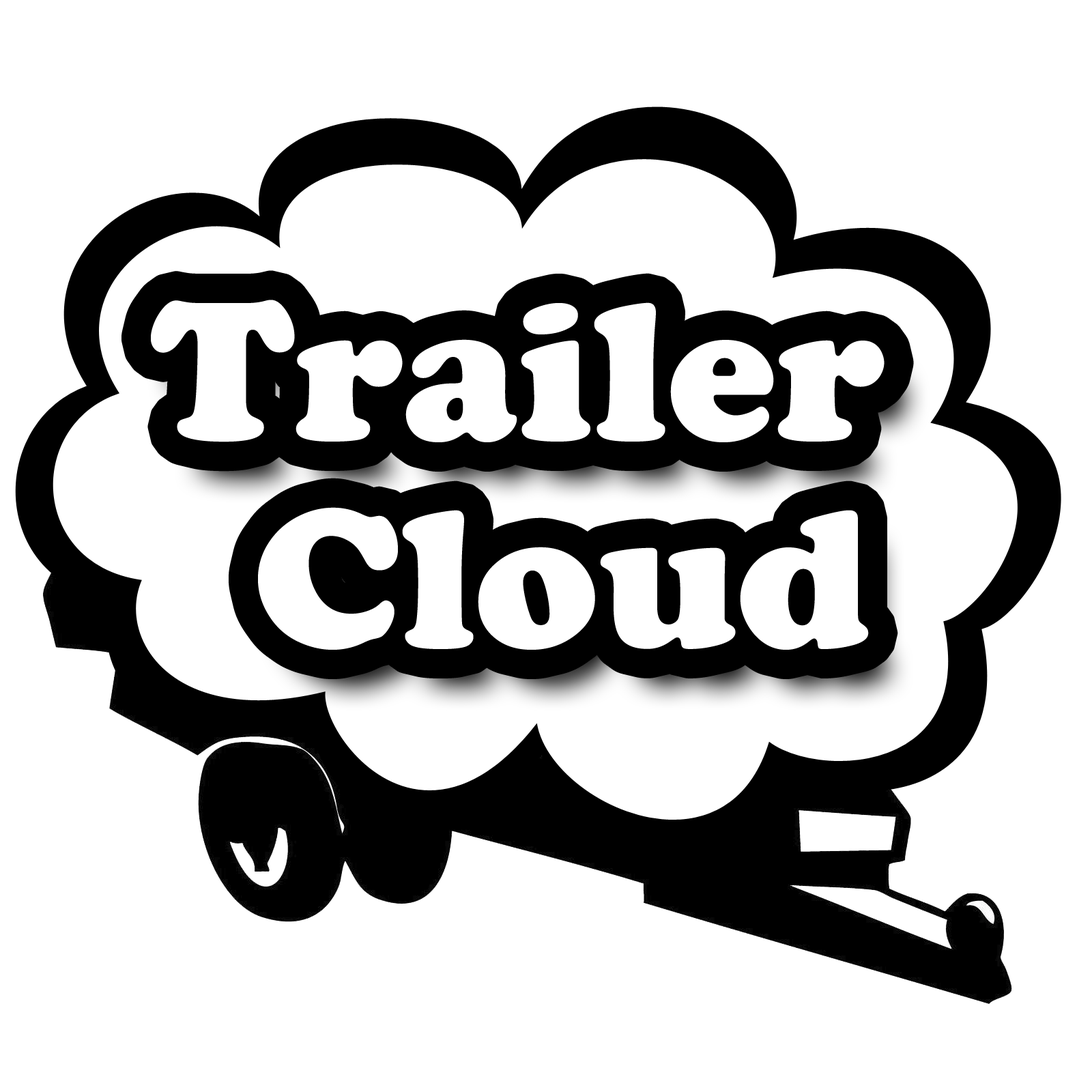
<style>
.page{position:relative;width:1092px;height:1092px;background:#ffffff}
.page>*{position:absolute;margin:0}
.t1{font:204.7px/207.5px "CooperBlack";color:#ffffff}
</style>
<div class="page">
<p class="t1" style="left:151px;top:300px;width:734px;height:350px">Trailer<br>  Cloud</p>
</div>
